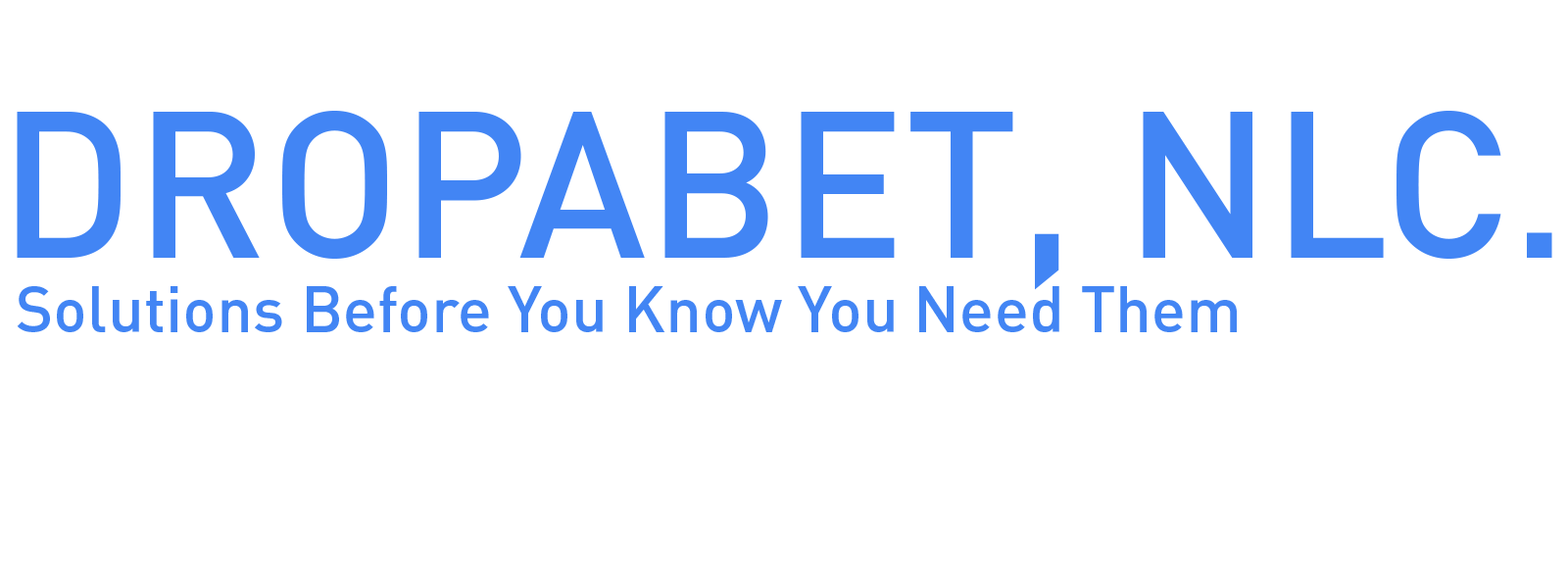
<style>
.page{position:relative;width:1568px;height:588px;background:#ffffff}
.page>*{position:absolute;margin:0}
.t1{font:204.4px "DIN-Medium";color:#4285f4}
.t2{font:63.9px "DIN-Medium";color:#4285f4}
</style>
<div class="page">
<p class="t1" style="left:17px;top:111px;width:1535px;height:179px">DROPABET, NLC.</p>
<p class="t2" style="left:17px;top:286px;width:1220px;height:46px">Solutions Before You Know You Need Them</p>
</div>
